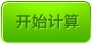
<style>
.page{position:relative;width:92px;height:44px}
.page>*{position:absolute;margin:0}
.t1{font:16px "FZYDZHJW--GB1-0";color:#358101}
</style>
<div class="page">
<p class="t1" style="left:15px;top:14px;width:64px;height:15px">开始计算</p>
</div>
